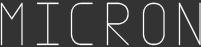
<style>
.page{position:relative;width:201px;height:47px;background:#333333}
.page>*{position:absolute;margin:0}
.t1{font:60.4px "Infinity";letter-spacing:0.15em;color:#ffffff;text-transform:uppercase}
</style>
<div class="page">
<p class="t1" style="left:0px;top:2px;width:201px;height:44px">Micron</p>
</div>
